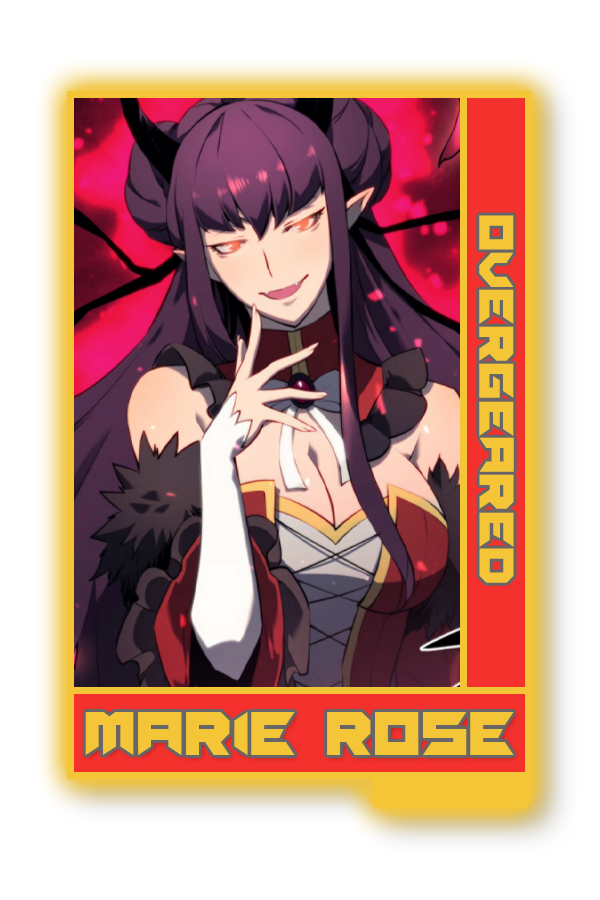
<style>
.page{position:relative;width:600px;height:900px;background:#ffffff}
.page>*{position:absolute;margin:0}
.t1{font:48.8px "Suggested-Regular";color:#f4c536}
.t2{font:62.5px "Suggested-Regular";color:#f4c536}
</style>
<div class="page">
<p class="t1" style="left:479px;top:215px;width:35px;height:368px;rotate:90deg">OVERGEARED</p>
<p class="t2" style="left:85px;top:712px;width:429px;height:43px">Marie Rose</p>
</div>
